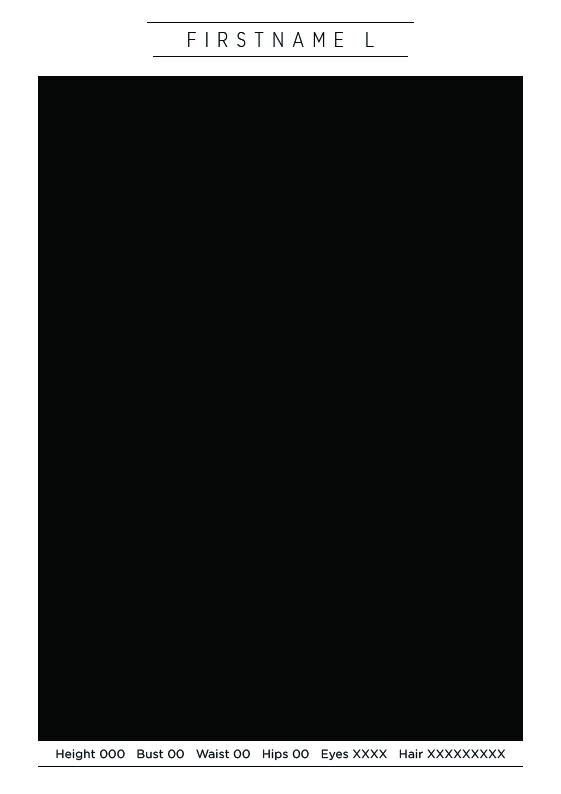
<style>
.page{position:relative;width:561px;height:794px;background:#060808}
.page>*{position:absolute;margin:0}
.t1{font:21.5px "GothamPro-Light";letter-spacing:0.56em;color:#000000;scale:0.7 1}
.t2{font:11.7px "GothamPro";letter-spacing:0.02em;color:#000000}
</style>
<div class="page">
<p class="t1" style="left:188px;top:32px;width:186px;height:15px">FIRSTNAME L</p>
<p class="t2" style="left:56px;top:749px;width:449px;height:12px">Height 000   Bust 00   Waist 00   Hips 00   Eyes XXXX   Hair XXXXXXXXX</p>
</div>
